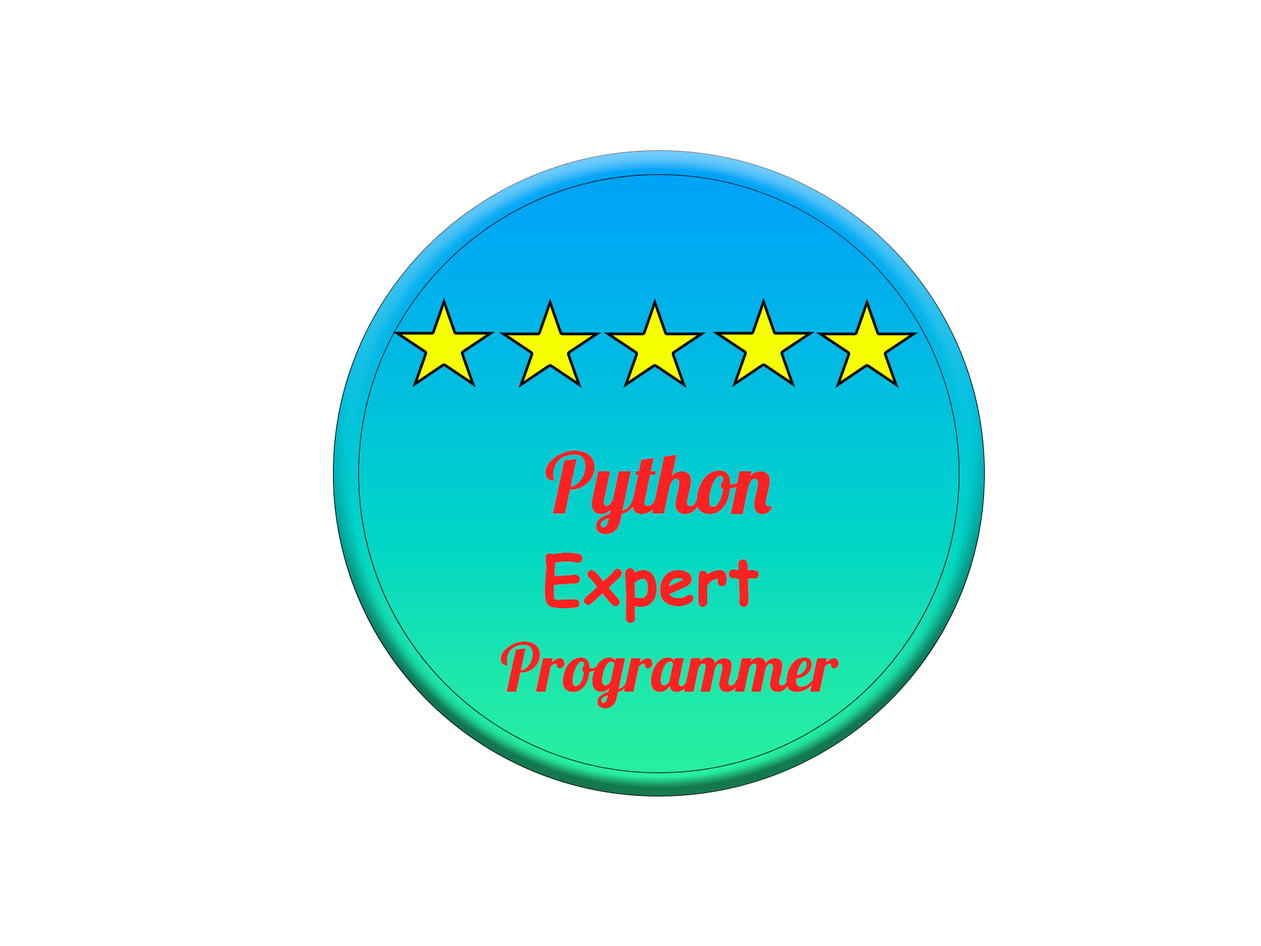
<style>
.page{position:relative;width:1261px;height:946px;background:#ffffff}
.page>*{position:absolute;margin:0}
.t1{font:83.4px "Lobster-Regular";color:#ff2121}
.t2{font:66.7px "ComicSansMS-Bold";color:#ff2121}
.t3{font:66.7px "Lobster-Regular";color:#ff2121}
</style>
<div class="page">
<p class="t1" style="left:545px;top:450px;width:227px;height:84px">Python</p>
<p class="t2" style="left:544px;top:552px;width:215px;height:71px">Expert</p>
<p class="t3" style="left:500px;top:641px;width:339px;height:67px">Programmer</p>
</div>
